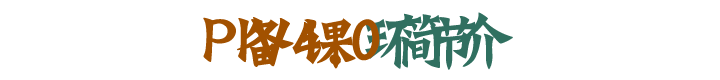
<style>
.page{position:relative;width:720px;height:80px;background:#ffffff}
.page>*{position:absolute;margin:0}
.t1{font:60px "HYh3gj";color:#a25100}
.t2{font:60px "HYh3gj";letter-spacing:0.05em;color:#307060}
</style>
<div class="page">
<p class="t1" style="left:203px;top:17px;width:177px;height:48px">PIV4.0</p>
<p class="t2" style="left:396px;top:12px;width:117px;height:58px">简介</p>
</div>
